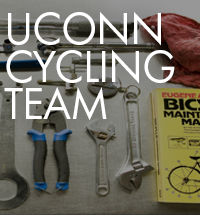
<style>
.page{position:relative;width:200px;height:215px}
.page>*{position:absolute;margin:0}
.t1{font:45.8px/37.5px "FuturaPT-Book";letter-spacing:-0.025em;color:#ffffff;text-transform:uppercase}
</style>
<div class="page">
<p class="t1" style="left:4px;top:11px;width:171px;height:110px">uconn<br>cycling<br>team</p>
</div>
